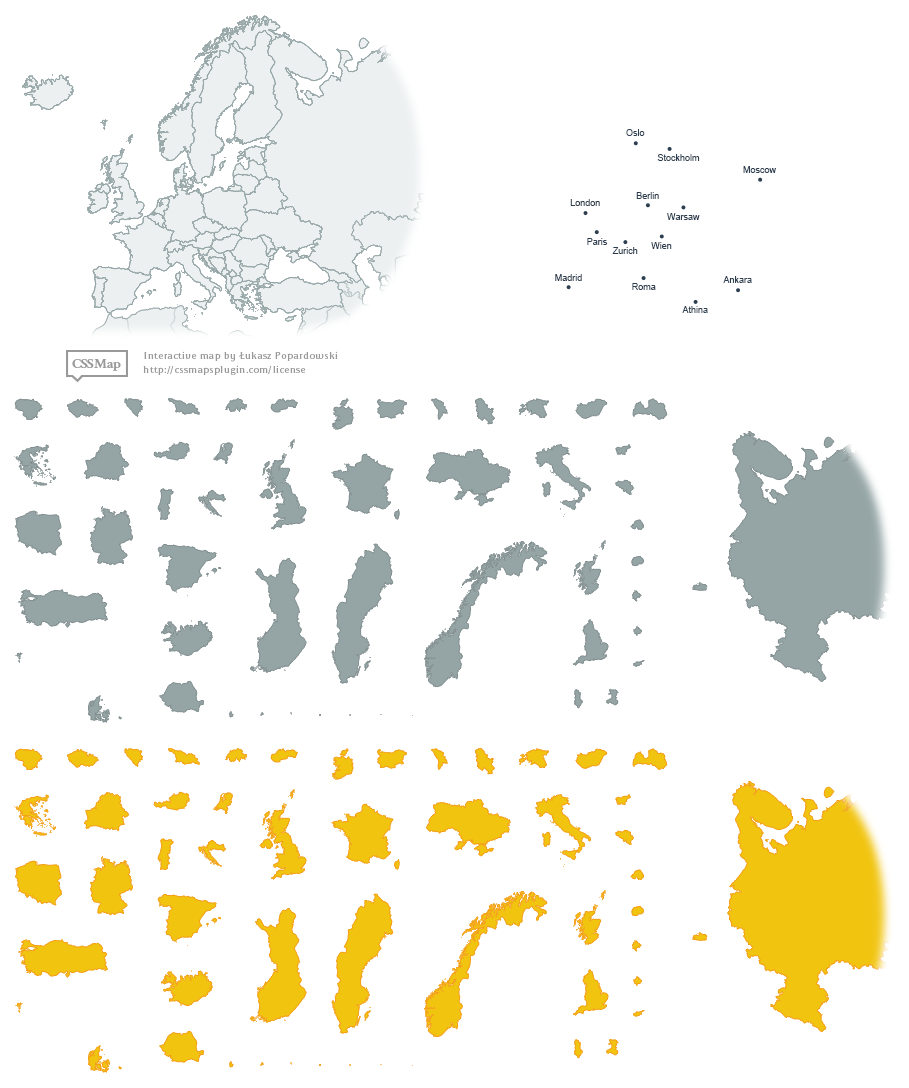
<style>
.page{position:relative;width:909px;height:1088px;background:#ffffff}
.page>*{position:absolute;margin:0}
.t1{font:9px "ArialMT";color:#2c3e50}
</style>
<div class="page">
<p class="t1" style="left:626px;top:129px;width:19px;height:7px">Oslo</p>
<p class="t1" style="left:657px;top:154px;width:43px;height:7px">Stockholm</p>
<p class="t1" style="left:743px;top:166px;width:33px;height:7px">Moscow</p>
<p class="t1" style="left:636px;top:192px;width:23px;height:7px">Berlin</p>
<p class="t1" style="left:570px;top:199px;width:30px;height:7px">London</p>
<p class="t1" style="left:667px;top:213px;width:33px;height:7px">Warsaw</p>
<p class="t1" style="left:587px;top:238px;width:21px;height:7px">Paris</p>
<p class="t1" style="left:651px;top:242px;width:21px;height:7px">Wien</p>
<p class="t1" style="left:612px;top:247px;width:26px;height:7px">Zurich</p>
<p class="t1" style="left:555px;top:274px;width:27px;height:7px">Madrid</p>
<p class="t1" style="left:723px;top:276px;width:29px;height:7px">Ankara</p>
<p class="t1" style="left:632px;top:283px;width:24px;height:7px">Roma</p>
<p class="t1" style="left:682px;top:306px;width:26px;height:7px">Athina</p>
</div>
